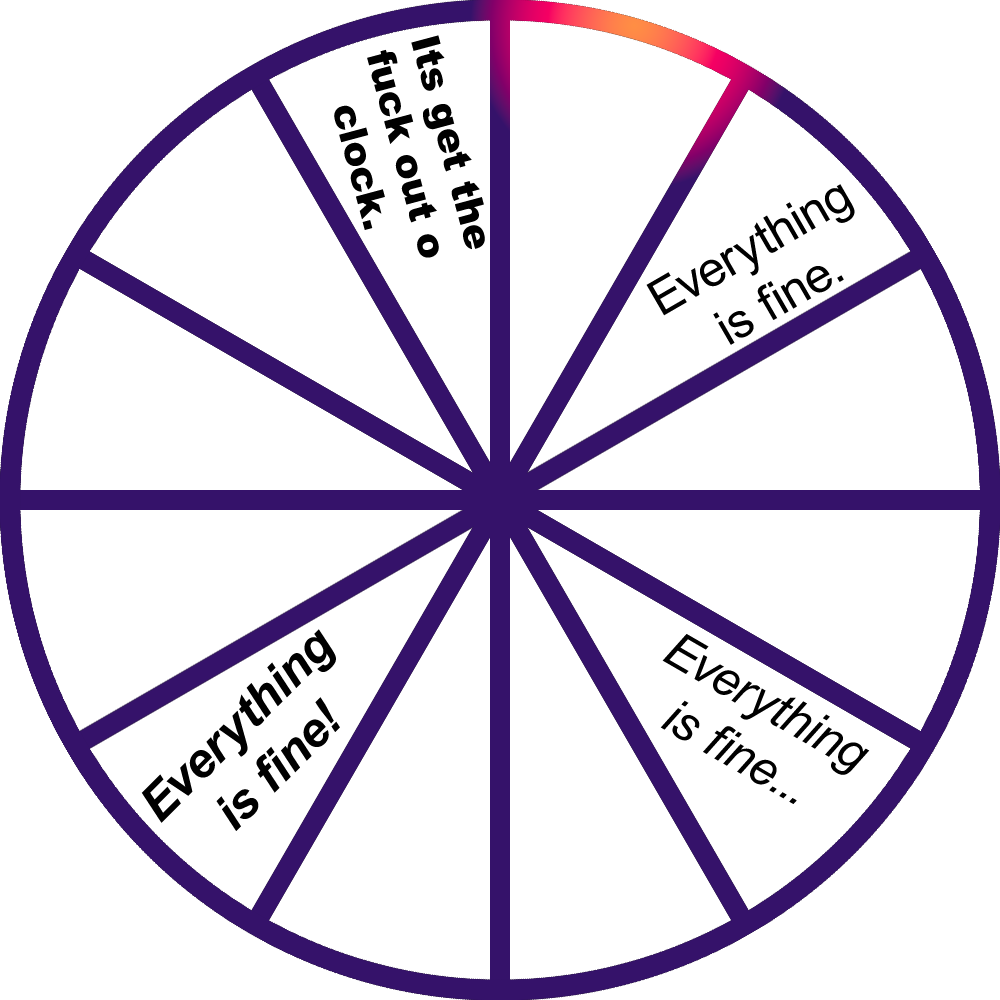
<style>
.page{position:relative;width:1000px;height:1000px;background:#ffffff}
.page>*{position:absolute;margin:0}
.t1{font:39px "Arial-Black";color:#000000}
.t2{font:49px "ArialMT";color:#000000}
.t3{font:49px "Arial-BoldItalicMT";color:#000000}
.t4{font:49px "Arial-ItalicMT";color:#000000}
</style>
<div class="page">
<p class="t1" style="left:334px;top:35px;width:151px;height:223px;text-align:center;rotate:75deg">Its get the<br>fuck out o<br>clock.</p>
<p class="t2" style="left:646px;top:184px;width:209px;height:161px;text-align:center;rotate:-30deg">Everything<br>is fine.</p>
<p class="t3" style="left:141px;top:629px;width:199px;height:202px;text-align:center;rotate:-45deg">Everything<br>is fine!</p>
<p class="t4" style="left:660px;top:634px;width:210px;height:170px;text-align:center;rotate:30deg">Everything<br>is fine...</p>
</div>
